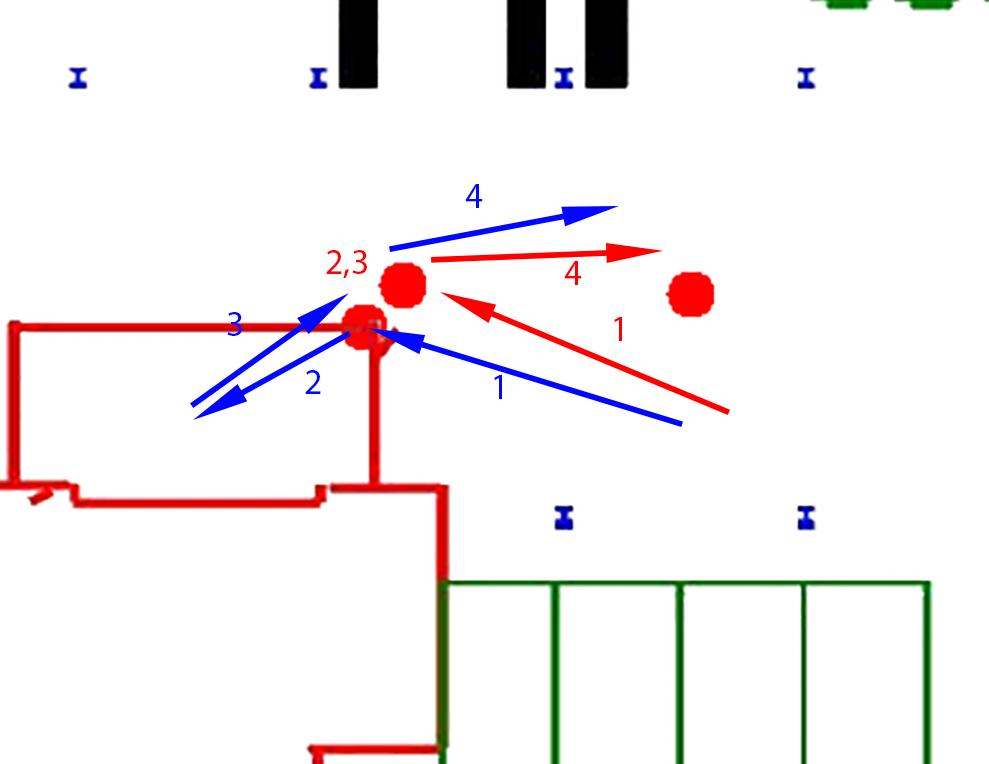
<style>
.page{position:relative;width:989px;height:764px;background:#ffffff}
.page>*{position:absolute;margin:0}
.t1{font:36px "MyriadPro-Regular";color:#0006ff}
.t2{font:36px "MyriadPro-Regular";color:#ff0000}
</style>
<div class="page">
<p class="t1" style="left:465px;top:184px;width:18px;height:24px">4</p>
<p class="t2" style="left:326px;top:250px;width:41px;height:29px">2,3</p>
<p class="t2" style="left:564px;top:261px;width:18px;height:24px">4</p>
<p class="t1" style="left:227px;top:312px;width:15px;height:24px">3</p>
<p class="t2" style="left:614px;top:317px;width:8px;height:24px">1</p>
<p class="t1" style="left:305px;top:370px;width:16px;height:24px">2</p>
<p class="t1" style="left:494px;top:375px;width:8px;height:24px">1</p>
</div>
